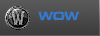
<style>
.page{position:relative;width:100px;height:36px}
.page>*{position:absolute;margin:0}
.t1{font:12px "Defused-ExtendedBold";color:#327cd5}
</style>
<div class="page">
<p class="t1" style="left:38px;top:10px;width:42px;height:13px">WOW</p>
</div>
